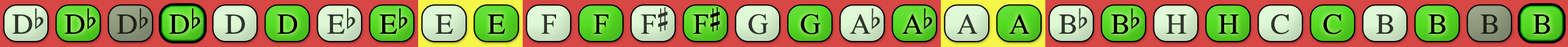
<style>
.page{position:relative;width:1568px;height:47px}
.page>*{position:absolute;margin:0}
.t1{font:29.2px "OpusChords";color:#2f352d}
.t2{font:29.2px "OpusChords";color:#000000}
.t3{font:29.2px "OpusChords";color:#1f211b}
.t4{font:29.2px "OpusChords";color:#30352d}
.t5{font:29.2px "OpusChords";color:#30362e}
.t6{font:29.2px "OpusChords";letter-spacing:-0.05em;color:#2f352d}
.t7{font:29.2px "OpusChords";letter-spacing:-0.05em;color:#000000}
</style>
<div class="page">
<p class="t1" style="left:12px;top:9px;width:32px;height:25px">Db</p>
<p class="t2" style="left:64px;top:9px;width:32px;height:25px">Db</p>
<p class="t3" style="left:117px;top:9px;width:31px;height:25px">Db</p>
<p class="t2" style="left:169px;top:9px;width:32px;height:25px">Db</p>
<p class="t1" style="left:225px;top:15px;width:20px;height:19px">D</p>
<p class="t2" style="left:277px;top:15px;width:20px;height:19px">D</p>
<p class="t4" style="left:327px;top:9px;width:29px;height:25px">Eb</p>
<p class="t2" style="left:379px;top:9px;width:29px;height:25px">Eb</p>
<p class="t5" style="left:435px;top:15px;width:18px;height:19px">E</p>
<p class="t2" style="left:487px;top:15px;width:18px;height:19px">E</p>
<p class="t5" style="left:541px;top:15px;width:15px;height:19px">F</p>
<p class="t2" style="left:593px;top:15px;width:15px;height:19px">F</p>
<p class="t4" style="left:641px;top:7px;width:27px;height:27px">F#</p>
<p class="t2" style="left:693px;top:7px;width:27px;height:27px">F#</p>
<p class="t1" style="left:748px;top:14px;width:20px;height:21px">G</p>
<p class="t2" style="left:800px;top:14px;width:20px;height:21px">G</p>
<p class="t6" style="left:850px;top:9px;width:30px;height:25px">Ab</p>
<p class="t7" style="left:902px;top:9px;width:30px;height:25px">Ab</p>
<p class="t1" style="left:957px;top:14px;width:20px;height:20px">A</p>
<p class="t2" style="left:1009px;top:14px;width:21px;height:20px">A</p>
<p class="t4" style="left:1059px;top:9px;width:28px;height:25px">Bb</p>
<p class="t2" style="left:1111px;top:9px;width:29px;height:25px">Bb</p>
<p class="t4" style="left:1166px;top:15px;width:20px;height:19px">H</p>
<p class="t2" style="left:1218px;top:15px;width:21px;height:19px">H</p>
<p class="t5" style="left:1271px;top:14px;width:18px;height:21px">C</p>
<p class="t2" style="left:1323px;top:14px;width:18px;height:21px">C</p>
<p class="t4" style="left:1376px;top:15px;width:18px;height:19px">B</p>
<p class="t2" style="left:1428px;top:15px;width:18px;height:19px">B</p>
<p class="t3" style="left:1480px;top:15px;width:18px;height:19px">B</p>
<p class="t2" style="left:1533px;top:15px;width:17px;height:19px">B</p>
</div>
